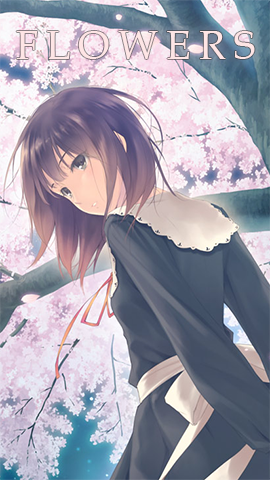
<style>
.page{position:relative;width:270px;height:480px}
.page>*{position:absolute;margin:0}
.t1{font:41.1px "BookAntiqua";letter-spacing:0.2em;color:#fee5e5}
</style>
<div class="page">
<p class="t1" style="left:16px;top:31px;width:239px;height:28px">FLOWERS</p>
</div>
